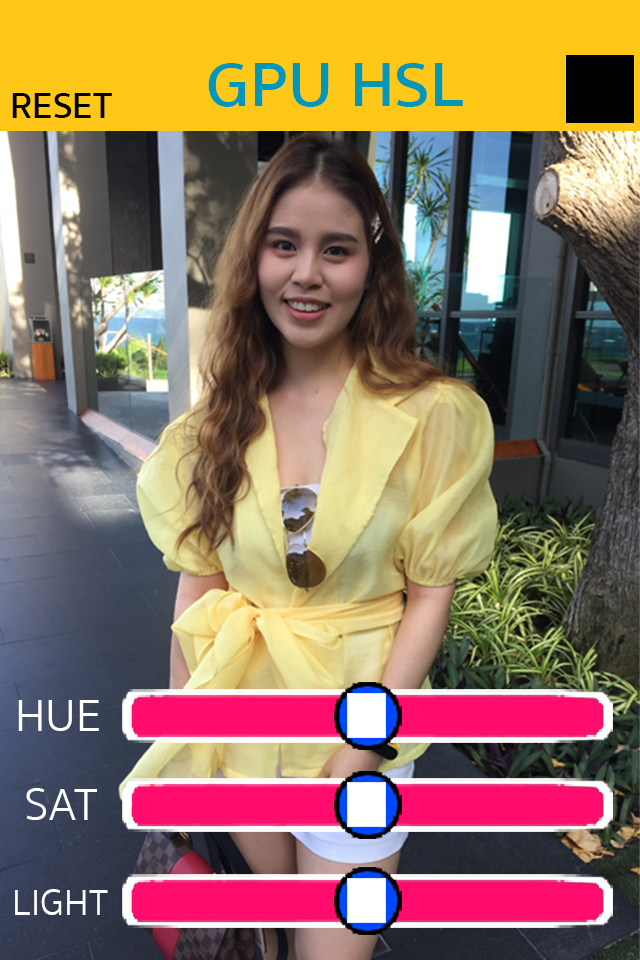
<style>
.page{position:relative;width:640px;height:960px}
.page>*{position:absolute;margin:0}
.t1{font:63.9px "SukhumvitSet-SemiBold";color:#0097b8;scale:1.05 1}
.t2{font:37.3px "SukhumvitSet-SemiBold";color:#000000}
.t3{font:46.2px "SukhumvitSet-Light";color:#ffffff}
.t4{font:37.3px "SukhumvitSet-Light";color:#ffffff}
</style>
<div class="page">
<p class="t1" style="left:208px;top:63px;width:255px;height:44px">GPU HSL</p>
<p class="t2" style="left:12px;top:93px;width:100px;height:25px">RESET</p>
<p class="t3" style="left:18px;top:700px;width:81px;height:31px">HUE</p>
<p class="t3" style="left:26px;top:788px;width:71px;height:32px">SAT</p>
<p class="t4" style="left:15px;top:889px;width:93px;height:26px">LIGHT</p>
</div>
